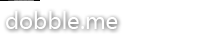
<style>
.page{position:relative;width:200px;height:40px;background:#ffffff}
.page>*{position:absolute;margin:0}
.t1{font:24px "SegoeUI";color:#ffffff}
</style>
<div class="page">
<p class="t1" style="left:6px;top:11px;width:112px;height:18px">dobble.me</p>
</div>
